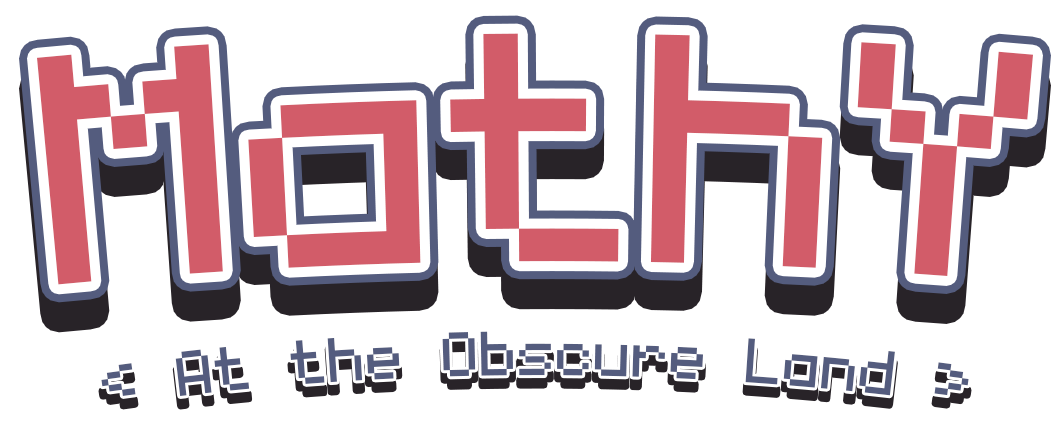
<style>
.page{position:relative;width:1061px;height:428px;background:#ffffff}
.page>*{position:absolute;margin:0}
.t1{font:520px "monogram";color:#d25c69}
.t2{font:100px "monogram"}
.t3{font:100px "monogram";color:#545c7e}
</style>
<div class="page">
<p class="t1" style="left:37px;top:33px;width:996px;height:252px">MathY</p>
<p class="t2" style="left:101px;top:342px;width:868px;height:65px">&lt; At the Obscure Land &gt;</p>
<p class="t3" style="left:101px;top:331px;width:868px;height:65px">&lt; At the Obscure Land &gt;</p>
</div>
